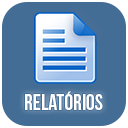
<style>
.page{position:relative;width:128px;height:128px;background:#446d95}
.page>*{position:absolute;margin:0}
.t1{font:22px "BebasNeue";color:#ffffff}
</style>
<div class="page">
<p class="t1" style="left:25px;top:91px;width:78px;height:19px">RELATÓRIOS</p>
</div>
